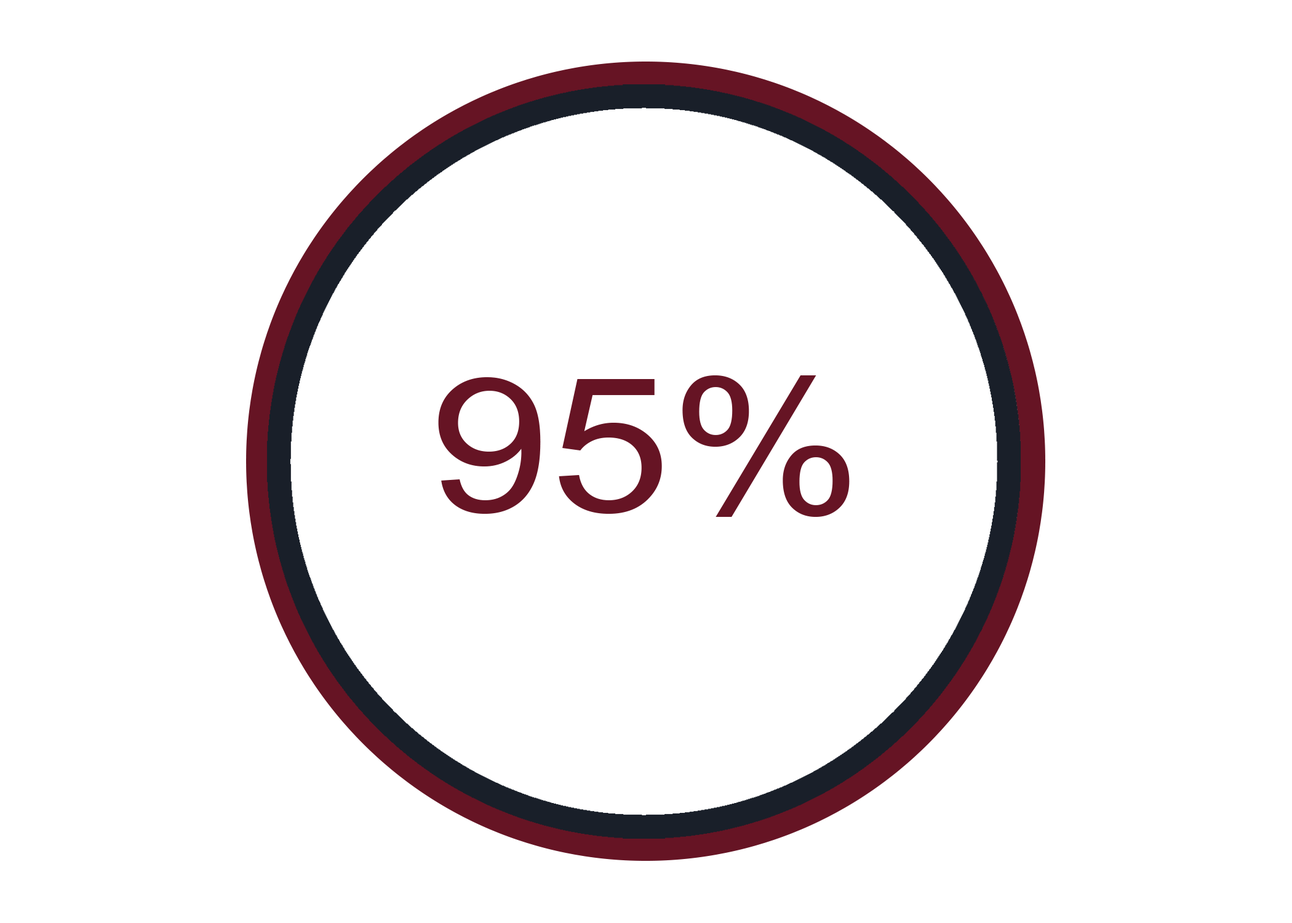
<style>
.page{position:relative;width:1292px;height:923px;background:#ffffff}
.page>*{position:absolute;margin:0}
.t1{font:188.2px "ArialMT";color:#661424;scale:1.15 1}
</style>
<div class="page">
<p class="t1" style="left:438px;top:375px;width:412px;height:142px">95%</p>
</div>
